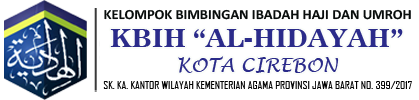
<style>
.page{position:relative;width:419px;height:100px;background:#ffffff}
.page>*{position:absolute;margin:0}
.t1{font:14px "Calibri-Bold";color:#090d0c}
.t2{font:25px "News701BT-BoldA";color:#2b2b8a}
.t3{font:19px "LucidaHandwriting-Italic";color:#2b2b8a}
.t4{font:11px "AgencyFB-Reg";color:#020202;scale:1.07 1}
</style>
<div class="page">
<p class="t1" style="left:104px;top:9px;width:307px;height:11px">KELOMPOK BIMBINGAN IBADAH HAJI DAN UMROH</p>
<p class="t2" style="left:110px;top:29px;width:293px;height:18px">KBIH “AL-HIDAYAH”</p>
<p class="t3" style="left:178px;top:56px;width:161px;height:17px">KOTA CIREBON</p>
<p class="t4" style="left:103px;top:81px;width:309px;height:8px">SK. KA. KANTOR WILAYAH KEMENTERIAN AGAMA PROVINSI JAWA BARAT NO. 399/2017</p>
</div>
